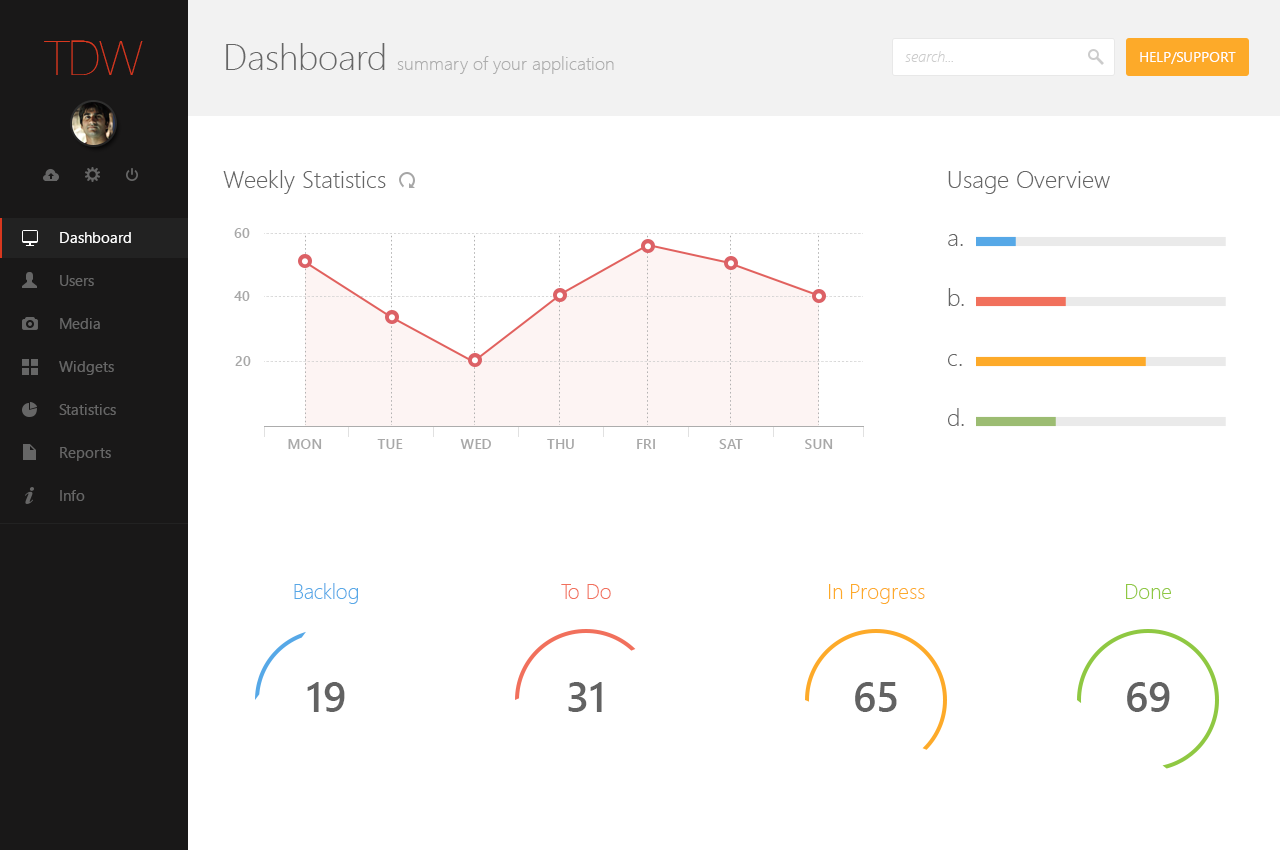
<style>
.page{position:relative;width:1280px;height:850px;background:#ffffff}
.page>*{position:absolute;margin:0}
.t1{font:48px "HelveticaNeue-UltraLight";color:#d8381f}
.t2{font:36px "SegoeUI-Light";color:#666666}
.t3{font:15px "SegoeUI-LightItalic";color:#cccccc}
.t4{font:14px "SegoeUI";color:#ffffff;text-transform:uppercase}
.t5{font:18px "SegoeUI-Light";color:#acacac}
.t6{font:24px "SegoeUI-Light";color:#666666}
.t7{font:15px/43px "SegoeUI";color:#666666}
.t8{font:15px/43px "SegoeUI";color:#ffffff}
.t9{font:14px "SegoeUI-Semibold";color:#a8a8a8;text-transform:uppercase}
.t10{font:21px "SegoeUI-Light";color:#56a8e7}
.t11{font:21px "SegoeUI-Light";color:#f1705c}
.t12{font:21px "SegoeUI-Light";color:#fdaa29}
.t13{font:21px "SegoeUI-Light";color:#8fc842}
.t14{font:42px "SegoeUI-Semibold";color:#626262}
</style>
<div class="page">
<p class="t1" style="left:44px;top:40px;width:99px;height:35px">TDW</p>
<p class="t2" style="left:226px;top:43px;width:159px;height:27px">Dashboard</p>
<p class="t3" style="left:905px;top:51px;width:48px;height:11px">search...</p>
<p class="t4" style="left:1140px;top:52px;width:96px;height:12px">Help/Support</p>
<p class="t5" style="left:397px;top:56px;width:217px;height:18px">summary of your application</p>
<p class="t6" style="left:223px;top:170px;width:163px;height:24px">Weekly Statistics</p>
<p class="t6" style="left:948px;top:171px;width:162px;height:23px">Usage Overview</p>
<p class="t7" style="left:59px;top:232px;width:72px;height:269px"><span class="t8">Dashboard<br></span>Users<br>Media<br>Widgets<br>Statistics<br>Reports<br>Info</p>
<p class="t9" style="left:234px;top:228px;width:16px;height:10px">60</p>
<p class="t6" style="left:948px;top:234px;width:15px;height:12px">a.</p>
<p class="t9" style="left:234px;top:291px;width:16px;height:10px">40</p>
<p class="t6" style="left:948px;top:288px;width:16px;height:18px">b.</p>
<p class="t9" style="left:235px;top:356px;width:16px;height:10px">20</p>
<p class="t6" style="left:948px;top:354px;width:14px;height:12px">c.</p>
<p class="t6" style="left:948px;top:408px;width:16px;height:18px">d.</p>
<p class="t9" style="left:288px;top:439px;width:34px;height:10px">mon</p>
<p class="t9" style="left:377px;top:439px;width:26px;height:10px">Tue</p>
<p class="t9" style="left:460px;top:439px;width:31px;height:10px">wed</p>
<p class="t9" style="left:547px;top:439px;width:27px;height:10px">thu</p>
<p class="t9" style="left:637px;top:439px;width:18px;height:10px">fri</p>
<p class="t9" style="left:719px;top:439px;width:24px;height:10px">sat</p>
<p class="t9" style="left:805px;top:439px;width:28px;height:10px">sun</p>
<p class="t10" style="left:294px;top:583px;width:64px;height:21px">Backlog</p>
<p class="t11" style="left:561px;top:584px;width:50px;height:15px">To Do</p>
<p class="t12" style="left:829px;top:584px;width:96px;height:20px">In Progress</p>
<p class="t13" style="left:1126px;top:584px;width:45px;height:15px">Done</p>
<p class="t14" style="left:307px;top:682px;width:38px;height:30px">19</p>
<p class="t14" style="left:568px;top:682px;width:34px;height:30px">31</p>
<p class="t14" style="left:855px;top:682px;width:42px;height:30px">65</p>
<p class="t14" style="left:1127px;top:682px;width:43px;height:30px">69</p>
</div>
